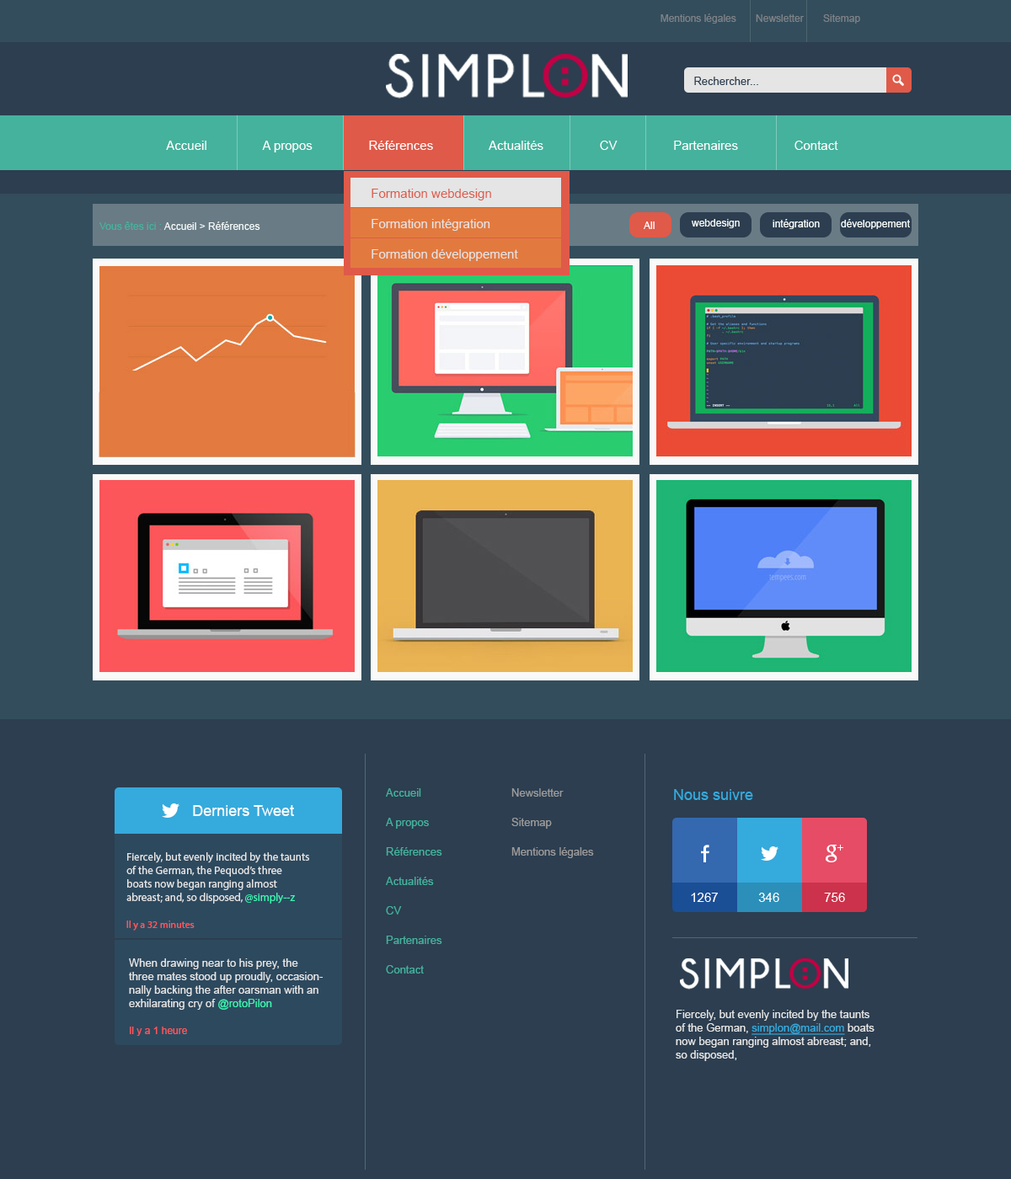
<style>
.page{position:relative;width:1011px;height:1179px;background:#2c3e50}
.page>*{position:absolute;margin:0}
.t1{font:10.1px "ArialMT";color:#7e8286}
.t2{font:11px "ArialMT";color:#2c3e50}
.t3{font:12.6px "ArialMT";color:#ffffff}
.t4{font:10.1px "ArialMT";color:#f3f9f8}
.t5{font:10.1px "ArialMT";color:#45b29d}
.t6{font:10.1px "ArialMT";color:#ffffff}
.t7{font:10.1px "ArialMT";color:#f6f9f8}
.t8{font:10.1px "ArialMT";color:#fafefd}
.t9{font:10.1px "ArialMT";color:#f9fdfc}
.t10{font:11px/29.5px "ArialMT";color:#45b29d}
.t11{font:11px/29.5px "ArialMT";color:#9c9a9a}
.t12{font:15.2px "ArialMT";color:#35aadc}
.t13{font:15.2px "ArialMT";color:#ffffff}
.t14{font:11px/13.5px "MyriadPro-Regular";color:#e5e5e5}
.t15{font:11px/13.5px "MyriadPro-Regular";color:#3df6b2}
.t16{font:10.1px/13.5px "MyriadPro-Regular";color:#fc565a}
.t17{font:11px/13.5px "ArialMT";color:#e5e5e5}
.t18{font:11px/13.5px "ArialMT";color:#3df6b2}
.t19{font:10.1px/13.5px "ArialMT";color:#fc565a}
.t20{font:11px/13.5px "ArialMT";color:#35aadc;text-decoration:underline}
</style>
<div class="page">
<p class="t1" style="left:661px;top:13px;width:199px;height:11px">Mentions légales       Newsletter       Sitemap</p>
<p class="t2" style="left:694px;top:77px;width:64px;height:8px">Rechercher...</p>
<p class="t3" style="left:166px;top:141px;width:672px;height:11px">Accueil                A propos                Références                Actualités                CV                Partenaires                Contact</p>
<p class="t4" style="left:99px;top:222px;width:161px;height:8px"><span class="t5">Vous êtes ici : </span>Accueil &gt; Références</p>
<p class="t6" style="left:644px;top:222px;width:11px;height:7px">All</p>
<p class="t7" style="left:692px;top:219px;width:48px;height:9px">webdesign</p>
<p class="t8" style="left:773px;top:219px;width:47px;height:10px">intégration</p>
<p class="t9" style="left:841px;top:219px;width:69px;height:10px">développement</p>
<p class="t10" style="left:386px;top:789px;width:56px;height:185px">Accueil<br>A propos<br>Références<br>Actualités<br>CV<br>Partenaires<br>Contact</p>
<p class="t11" style="left:511px;top:789px;width:83px;height:69px">Newsletter<br>Sitemap<br>Mentions légales</p>
<p class="t12" style="left:674px;top:789px;width:79px;height:11px">Nous suivre</p>
<p class="t13" style="left:193px;top:805px;width:101px;height:11px">Derniers Tweet</p>
<p class="t14" style="left:126px;top:853px;width:183px;height:78px">Fiercely, but evenly incited by the taunts<br>of the German, the Pequod’s three<br>boats now began ranging almost <br>abreast; and, so disposed, <span class="t15">@simply--z<br><br></span><span class="t16">Il y a 32 minutes</span></p>
<p class="t3" style="left:691px;top:893px;width:27px;height:9px">1267</p>
<p class="t3" style="left:758px;top:893px;width:21px;height:9px">346</p>
<p class="t3" style="left:824px;top:893px;width:21px;height:9px">756</p>
<p class="t17" style="left:129px;top:959px;width:194px;height:77px">When drawing near to his prey, the<br>three mates stood up proudly, occasion-<br>nally backing the after oarsman with an <br>exhilarating cry of <span class="t18">@rotoPilon<br><br></span><span class="t19">Il y a 1 heure</span></p>
<p class="t17" style="left:676px;top:1010px;width:198px;height:52px">Fiercely, but evenly incited by the taunts<br>of the German, <span class="t20">simplon@mail.com</span> boats<br>now began ranging almost abreast; and,<br>so disposed,</p>
</div>
